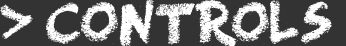
<style>
.page{position:relative;width:346px;height:46px;background:#333333}
.page>*{position:absolute;margin:0}
.t1{font:48px "RightChalk";color:#ffffff}
</style>
<div class="page">
<p class="t1" style="left:0px;top:0px;width:332px;height:48px">&gt; CONTROLS</p>
</div>
